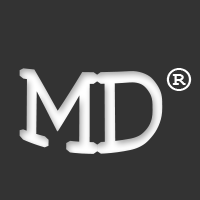
<style>
.page{position:relative;width:200px;height:200px;background:#333333}
.page>*{position:absolute;margin:0}
.t1{font:120px "CourierNewPS-BoldMT";color:#ffffff}
.t2{font:40px "CourierNewPS-BoldMT";color:#ffffff}
</style>
<div class="page">
<p class="t1" style="left:19px;top:68px;width:144px;height:86px">MD</p>
<p class="t2" style="left:166px;top:68px;width:26px;height:23px">®</p>
</div>
